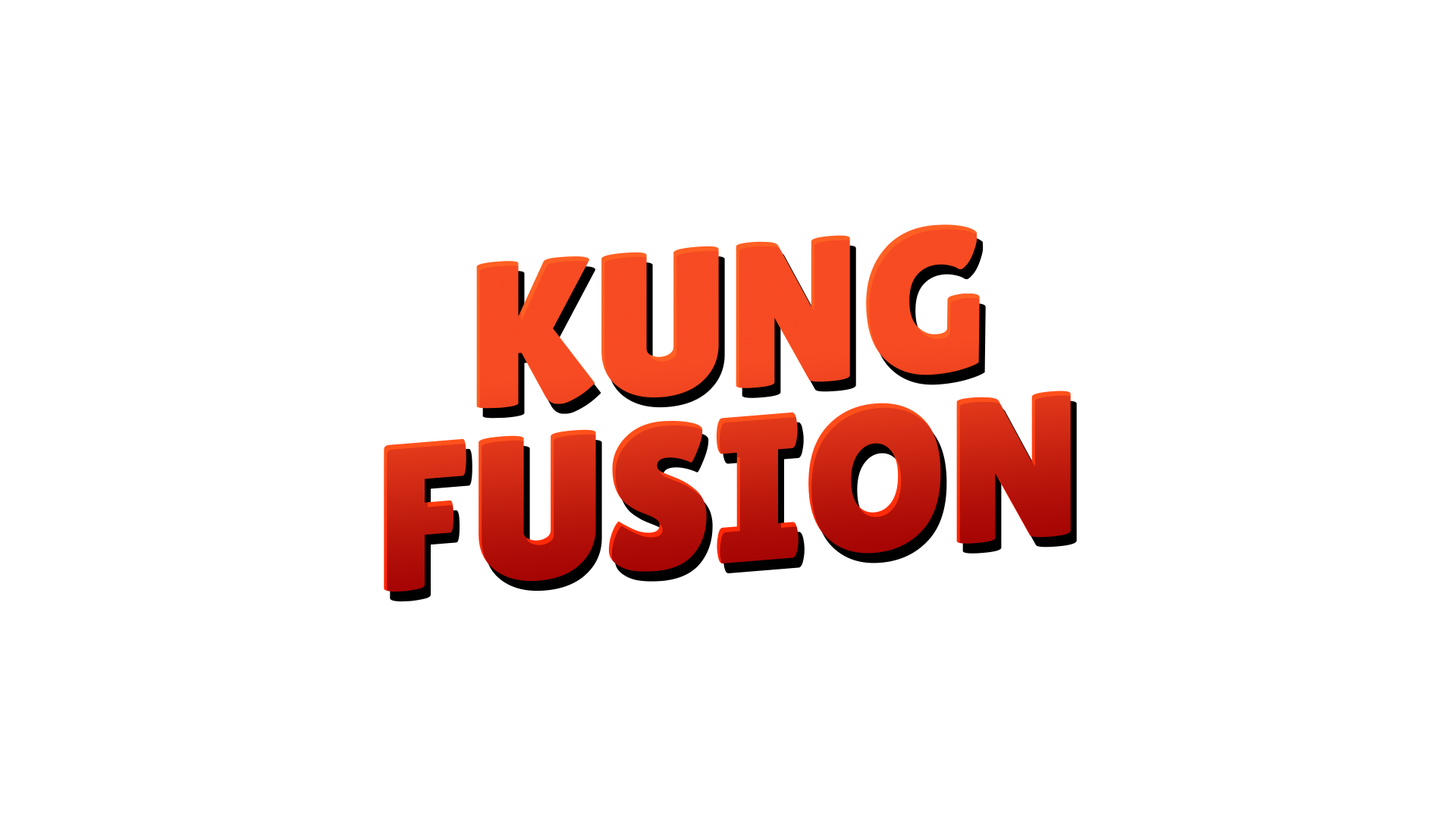
<style>
.page{position:relative;width:1456px;height:819px;background:#ffffff}
.page>*{position:absolute;margin:0}
.t1{font:207.7px "LilitaOne";color:#f74b23}
.t2{font:207.7px "LilitaOne"}
</style>
<div class="page">
<p class="t1" style="left:476px;top:224px;width:504px;height:185px;rotate:-5deg">KUNG</p>
<p class="t2" style="left:384px;top:391px;width:687px;height:201px;rotate:-5deg">FUSION</p>
</div>
